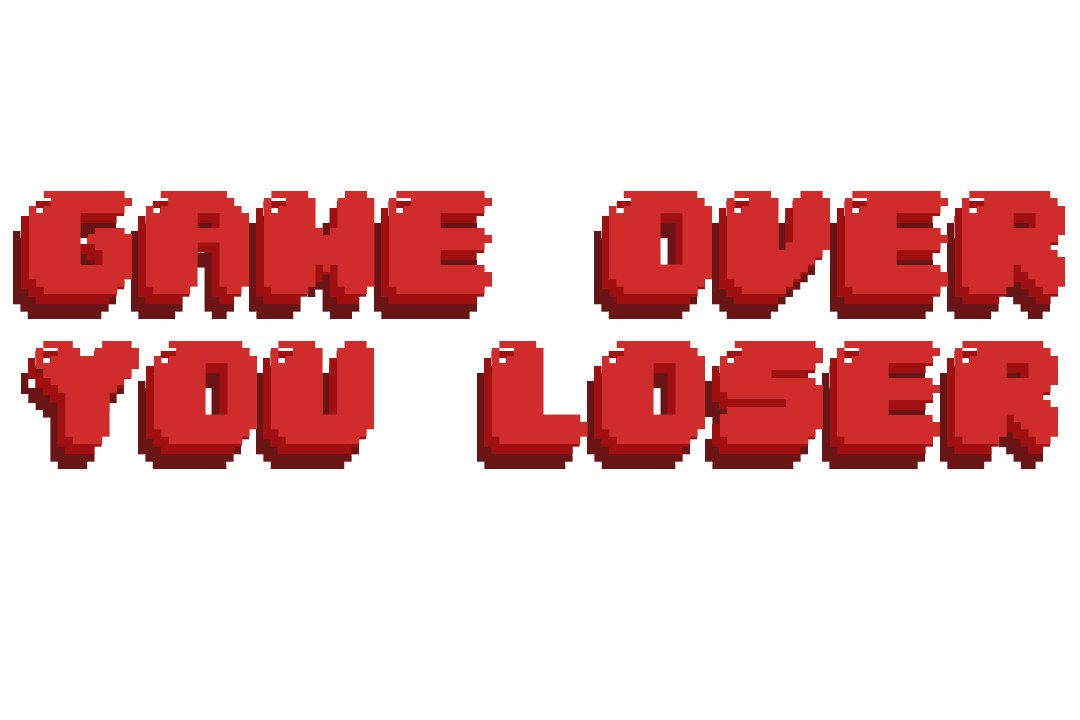
<style>
.page{position:relative;width:1080px;height:720px;background:#ffffff}
.page>*{position:absolute;margin:0}
.t1{font:125px "04b30";color:#d12c2c}
.t2{font:125px "04b30"}
</style>
<div class="page">
<p class="t1" style="left:29px;top:191px;width:1036px;height:253px;text-align:center">GAME OVER<br>YOU LOSER</p>
<p class="t1" style="left:21px;top:201px;width:1037px;height:253px;text-align:center">GAME OVER<br>YOU LOSER</p>
<p class="t2" style="left:13px;top:216px;width:1037px;height:253px;text-align:center">GAME OVER<br>YOU LOSER</p>
</div>
